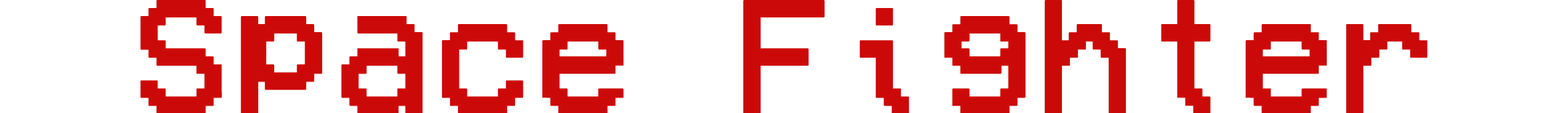
<style>
.page{position:relative;width:1568px;height:113px;background:#ffffff}
.page>*{position:absolute;margin:0}
.t1{font:163.9px "VCROSDMono";color:#cc0909;font-weight:bold}
</style>
<div class="page">
<p class="t1" style="left:140px;top:0px;width:1288px;height:114px">Space Fighter</p>
</div>
